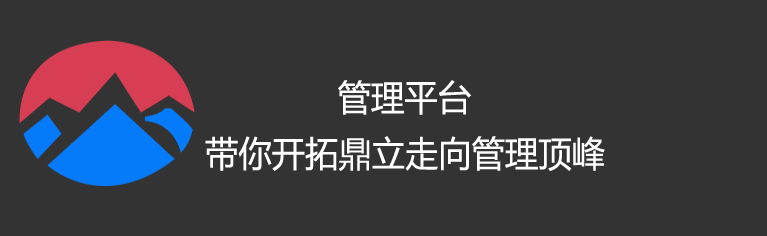
<style>
.page{position:relative;width:767px;height:236px;background:#333333}
.page>*{position:absolute;margin:0}
.t1{font:35.3px "MicrosoftYaHei";color:#ffffff;scale:0.94 1}
</style>
<div class="page">
<p class="t1" style="left:338px;top:80px;width:133px;height:35px">管理平台</p>
<p class="t1" style="left:205px;top:136px;width:400px;height:35px">带你开拓鼎立走向管理顶峰</p>
</div>
